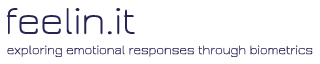
<style>
.page{position:relative;width:320px;height:64px;background:#ffffff}
.page>*{position:absolute;margin:0}
.t1{font:41.6px "Jura-Light";color:#262453}
.t2{font:13.7px "Jura-Light";color:#262453}
</style>
<div class="page">
<p class="t1" style="left:6px;top:7px;width:129px;height:28px">feelin.it</p>
<p class="t2" style="left:7px;top:45px;width:306px;height:12px">exploring emotional responses through biometrics</p>
</div>
